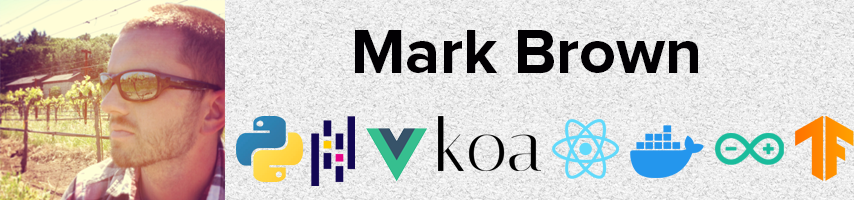
<style>
.page{position:relative;width:854px;height:200px}
.page>*{position:absolute;margin:0}
.t1{font:64px "ProximaNova-Bold";color:#020003}
</style>
<div class="page">
<p class="t1" style="left:355px;top:30px;width:343px;height:43px">Mark Brown</p>
</div>
